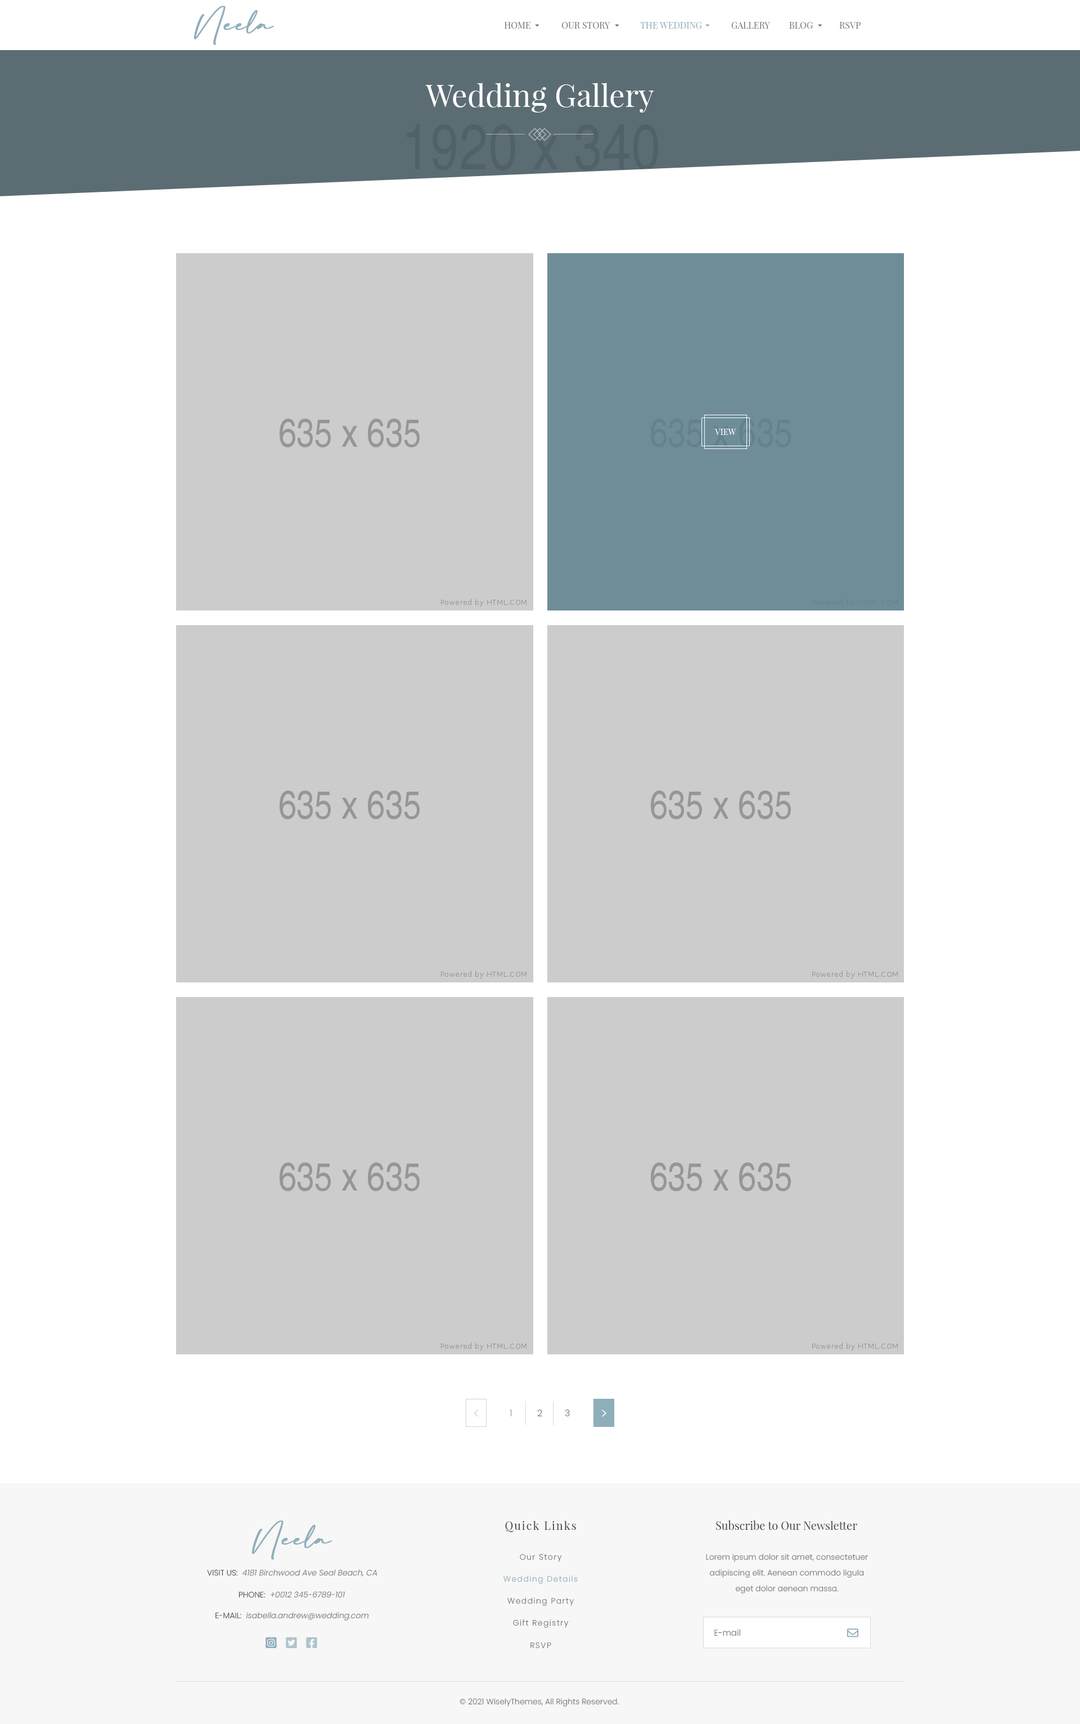
<style>
.page{position:relative;width:1080px;height:1724px;background:#ffffff}
.page>*{position:absolute;margin:0}
.t1{font:9px "PlayfairDisplay-Regular";color:#73777b}
.t2{font:9px "PlayfairDisplay-Regular";color:#8eaeba}
.t3{font:30.9px "PlayfairDisplay-Regular";color:#fefefe}
.t4{font:8.4px "PlayfairDisplay-Regular";color:#ffffff}
.t5{font:14.1px "Poppins-Light";color:#cbd9de}
.t6{font:9px "Poppins-Light";color:#8eaeba}
.t7{font:9px "Poppins-Light";color:#74777c}
.t8{font:14.1px "Poppins-Light";color:#ffffff}
.t9{font:11.3px "PlayfairDisplay-Regular";letter-spacing:0.1em;color:#484a4e}
.t10{font:11.3px "PlayfairDisplay-Regular";color:#484a4e}
.t11{font:7.9px "Poppins-Light";letter-spacing:0.1em;color:#74777c}
.t12{font:7.9px/15.8px "Poppins-Light";color:#74777c}
.t13{font:7.9px "Poppins-LightItalic";color:#74777c}
.t14{font:7.9px "Poppins-Light";color:#484a4e;text-transform:uppercase}
.t15{font:7.9px "Poppins-Light";letter-spacing:0.1em;color:#8eaeba}
.t16{font:8.4px "Poppins-Light";color:#73777b}
.t17{font:7.9px "Poppins-Light";color:#74777c}
</style>
<div class="page">
<p class="t1" style="left:504px;top:22px;width:26px;height:7px">HOME</p>
<p class="t1" style="left:562px;top:22px;width:48px;height:7px">OUR STORY</p>
<p class="t2" style="left:640px;top:22px;width:62px;height:7px">THE WEDDING</p>
<p class="t1" style="left:731px;top:22px;width:39px;height:7px">GALLERY</p>
<p class="t1" style="left:789px;top:22px;width:24px;height:7px">BLOG</p>
<p class="t1" style="left:839px;top:22px;width:22px;height:7px">RSVP</p>
<p class="t3" style="left:425px;top:83px;width:229px;height:29px">Wedding Gallery</p>
<p class="t4" style="left:715px;top:429px;width:21px;height:6px">VIEW</p>
<p class="t5" style="left:474px;top:1409px;width:5px;height:7px">&lt;</p>
<p class="t6" style="left:510px;top:1409px;width:2px;height:7px">1</p>
<p class="t7" style="left:537px;top:1409px;width:5px;height:7px">2</p>
<p class="t7" style="left:565px;top:1409px;width:5px;height:7px">3</p>
<p class="t8" style="left:601px;top:1409px;width:5px;height:7px">&gt;</p>
<p class="t9" style="left:505px;top:1520px;width:71px;height:12px">Quick Links</p>
<p class="t10" style="left:716px;top:1520px;width:141px;height:9px">Subscribe to Our Newsletter</p>
<p class="t11" style="left:520px;top:1553px;width:42px;height:9px">Our Story</p>
<p class="t12" style="left:706px;top:1553px;width:162px;height:40px;text-align:center">Lorem ipsum dolor sit amet, consectetuer adipiscing elit. Aenean commodo ligula eget dolor aenean massa.</p>
<p class="t13" style="left:207px;top:1569px;width:170px;height:8px"><span class="t14">Visit us:</span>  4181 Birchwood Ave Seal Beach, CA</p>
<p class="t15" style="left:503px;top:1575px;width:75px;height:8px">Wedding Details</p>
<p class="t13" style="left:238px;top:1591px;width:107px;height:7px"><span class="t14">Phone:</span>  +0012 345-6789-101</p>
<p class="t11" style="left:507px;top:1597px;width:67px;height:8px">Wedding Party</p>
<p class="t13" style="left:215px;top:1612px;width:154px;height:8px"><span class="t14">E-mail:</span>  isabella.andrew@wedding.com</p>
<p class="t11" style="left:513px;top:1619px;width:56px;height:8px">Gift Registry</p>
<p class="t16" style="left:714px;top:1628px;width:26px;height:8px">E-mail</p>
<p class="t11" style="left:530px;top:1641px;width:21px;height:7px">RSVP</p>
<p class="t17" style="left:460px;top:1698px;width:159px;height:8px">© 2021 WiselyThemes, All Rights Reserved.</p>
</div>
